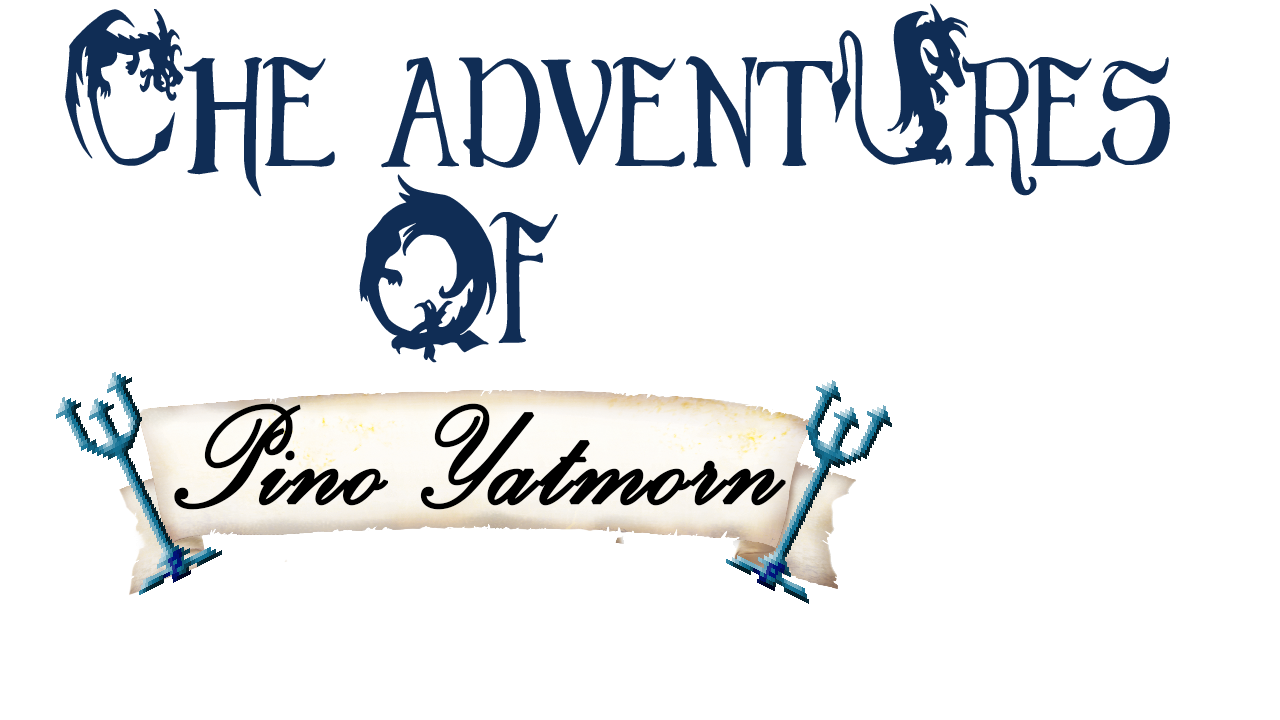
<style>
.page{position:relative;width:1280px;height:720px;background:#ffffff}
.page>*{position:absolute;margin:0}
.t1{font:108px "EGDragonCaps";color:#102d55;scale:0.83 1}
.t2{font:108px "PowerTab";color:#102d55;scale:0.83 1}
.t3{font:129.6px "EGDragonCaps";color:#102d55;scale:0.69 1}
.t4{font:180.5px "PalaceScriptMT";color:#000000;font-weight:bold;scale:0.9 1}
</style>
<div class="page">
<p class="t1" style="left:65px;top:3px;width:1105px;height:194px;text-align:center">The adventUres<br><br><span class="t2">o</span></p>
<p class="t2" style="left:359px;top:174px;width:199px;height:189px">o<span class="t1">O</span><span class="t3">f</span></p>
<p class="t4" style="left:174px;top:403px;width:612px;height:107px">Pino Yatmorn</p>
</div>
